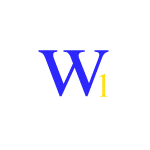
<style>
.page{position:relative;width:150px;height:150px;background:#ffffff}
.page>*{position:absolute;margin:0}
.t1{font:100px "TimesNewRomanPSMT";color:#2c27fc}
.t2{font:33.3px "TimesNewRomanPSMT";color:#fee013}
</style>
<div class="page">
<p class="t1" style="left:38px;top:50px;width:71px;height:47px">w</p>
<p class="t2" style="left:99px;top:74px;width:9px;height:23px">1</p>
</div>
